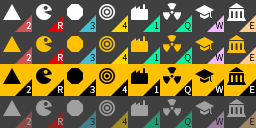
<style>
.page{position:relative;width:256px;height:128px;background:#404040}
.page>*{position:absolute;margin:0}
.t1{font:10px "SourceSansPro-Light";color:#ffffff;text-transform:uppercase}
.t2{font:10px "SourceSansPro-Light";color:#000000;text-transform:uppercase}
.t3{font:10px "SourceSansPro-Light";color:#a0a0a0;text-transform:uppercase}
.t4{font:10px "SourceSansPro-Light";color:#202020;text-transform:uppercase}
</style>
<div class="page">
<p class="t1" style="left:26px;top:22px;width:5px;height:7px">2</p>
<p class="t1" style="left:58px;top:22px;width:5px;height:7px">R</p>
<p class="t2" style="left:90px;top:22px;width:5px;height:7px">3</p>
<p class="t2" style="left:122px;top:22px;width:5px;height:7px">4</p>
<p class="t2" style="left:154px;top:22px;width:5px;height:7px">1</p>
<p class="t2" style="left:184px;top:22px;width:7px;height:9px">Q</p>
<p class="t2" style="left:215px;top:22px;width:8px;height:7px">W</p>
<p class="t2" style="left:250px;top:22px;width:5px;height:7px">E</p>
<p class="t1" style="left:26px;top:54px;width:5px;height:7px">2</p>
<p class="t1" style="left:58px;top:54px;width:5px;height:7px">R</p>
<p class="t2" style="left:90px;top:54px;width:5px;height:7px">3</p>
<p class="t2" style="left:122px;top:54px;width:5px;height:7px">4</p>
<p class="t2" style="left:154px;top:54px;width:5px;height:7px">1</p>
<p class="t2" style="left:184px;top:54px;width:7px;height:9px">Q</p>
<p class="t2" style="left:215px;top:54px;width:8px;height:7px">W</p>
<p class="t2" style="left:250px;top:54px;width:5px;height:7px">E</p>
<p class="t1" style="left:26px;top:86px;width:5px;height:7px">2</p>
<p class="t1" style="left:58px;top:86px;width:5px;height:7px">R</p>
<p class="t1" style="left:90px;top:86px;width:5px;height:7px">3</p>
<p class="t1" style="left:122px;top:86px;width:5px;height:7px">4</p>
<p class="t1" style="left:154px;top:86px;width:5px;height:7px">1</p>
<p class="t1" style="left:184px;top:86px;width:7px;height:9px">Q</p>
<p class="t1" style="left:215px;top:86px;width:8px;height:7px">W</p>
<p class="t1" style="left:250px;top:86px;width:5px;height:7px">E</p>
<p class="t3" style="left:26px;top:118px;width:5px;height:7px">2</p>
<p class="t3" style="left:58px;top:118px;width:5px;height:7px">R</p>
<p class="t4" style="left:90px;top:118px;width:5px;height:7px">3</p>
<p class="t4" style="left:122px;top:118px;width:5px;height:7px">4</p>
<p class="t4" style="left:154px;top:118px;width:5px;height:7px">1</p>
<p class="t4" style="left:184px;top:118px;width:7px;height:9px">Q</p>
<p class="t4" style="left:215px;top:118px;width:8px;height:7px">W</p>
<p class="t4" style="left:250px;top:118px;width:5px;height:7px">E</p>
</div>
